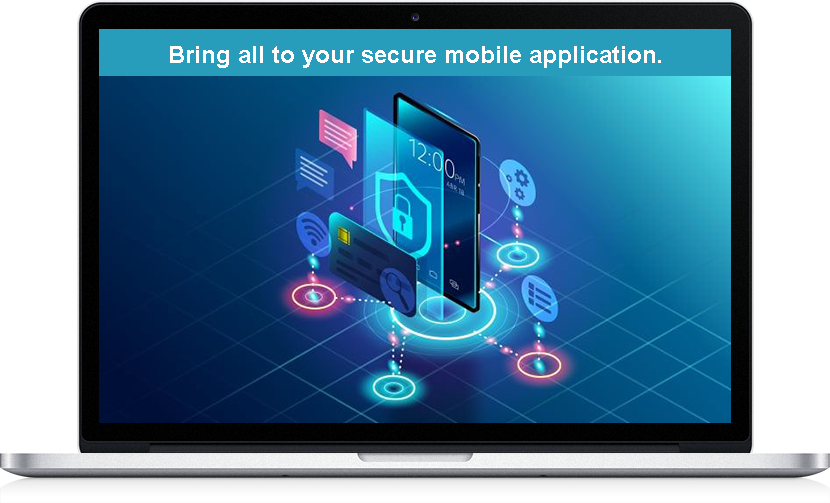
<style>
.page{position:relative;width:830px;height:503px}
.page>*{position:absolute;margin:0}
.t1{font:24px "Arial-BoldMT";color:#fefdfd}
</style>
<div class="page">
<p class="t1" style="left:170px;top:46px;width:491px;height:22px">Bring all to your secure mobile application.</p>
</div>
